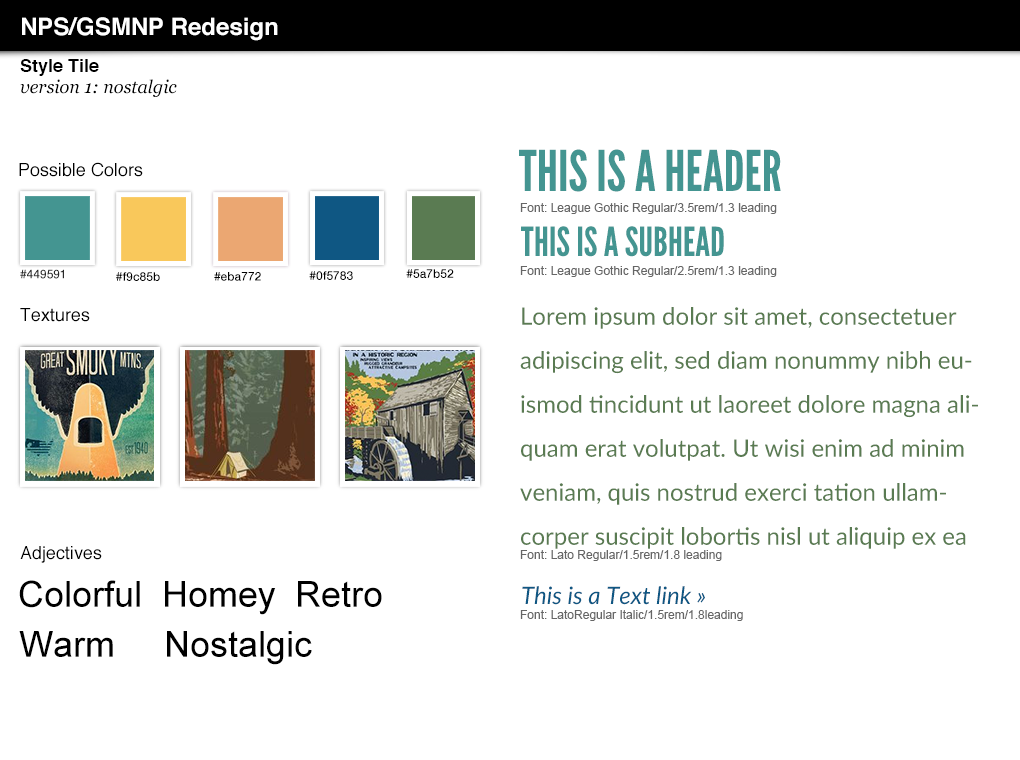
<style>
.page{position:relative;width:1020px;height:760px;background:#ffffff}
.page>*{position:absolute;margin:0}
.t1{font:24px "Helvetica-Bold";color:#ffffff}
.t2{font:18px "Helvetica-Bold";color:#000000}
.t3{font:18px "Georgia-Italic";color:#000000}
.t4{font:56px "LeagueGothic-Regular";color:#449591}
.t5{font:18px "Helvetica";color:#000000}
.t6{font:12px "ArialMT";color:#666666}
.t7{font:40px "LeagueGothic-Regular";color:#449591}
.t8{font:12px "HelveticaNeue-Medium";color:#282828}
.t9{font:12px "HelveticaNeue-Medium";color:#000000}
.t10{font:24px/44px "Lato-Regular";color:#5a7b52}
.t11{font:36px "ArialMT";color:#000000}
.t12{font:24px "Lato-Italic";color:#0f5783}
</style>
<div class="page">
<p class="t1" style="left:22px;top:17px;width:256px;height:24px">NPS/GSMNP Redesign</p>
<p class="t2" style="left:20px;top:59px;width:79px;height:17px">Style Tile</p>
<p class="t3" style="left:20px;top:79px;width:157px;height:18px">version 1: nostalgic</p>
<p class="t4" style="left:519px;top:149px;width:262px;height:43px">THIS IS A HEADER</p>
<p class="t5" style="left:19px;top:162px;width:124px;height:15px">Possible Colors</p>
<p class="t6" style="left:520px;top:203px;width:257px;height:11px">Font: League Gothic Regular/3.5rem/1.3 leading</p>
<p class="t7" style="left:521px;top:226px;width:203px;height:31px">THIS IS A SUBHEAD</p>
<p class="t8" style="left:20px;top:269px;width:44px;height:10px">#449591</p>
<p class="t9" style="left:406px;top:269px;width:48px;height:9px">#5a7b52</p>
<p class="t6" style="left:520px;top:266px;width:257px;height:11px">Font: League Gothic Regular/2.5rem/1.3 leading</p>
<p class="t9" style="left:116px;top:272px;width:44px;height:9px">#f9c85b</p>
<p class="t9" style="left:214px;top:272px;width:47px;height:9px">#eba772</p>
<p class="t9" style="left:309px;top:271px;width:44px;height:9px">#0f5783</p>
<p class="t5" style="left:20px;top:308px;width:70px;height:14px">Textures</p>
<p class="t10" style="left:520px;top:307px;width:458px;height:242px">Lorem ipsum dolor sit amet, consectetuer adipiscing elit, sed diam nonummy nibh euismod tincidunt ut laoreet dolore magna aliquam erat volutpat. Ut wisi enim ad minim veniam, quis nostrud exerci tation ullamcorper suscipit lobortis nisl ut aliquip ex ea commodo consequat. Duis autem vel feugait.</p>
<p class="t5" style="left:20px;top:546px;width:82px;height:17px">Adjectives</p>
<p class="t6" style="left:520px;top:550px;width:202px;height:11px">Font: Lato Regular/1.5rem/1.8 leading</p>
<p class="t11" style="left:19px;top:580px;width:121px;height:28px">Colorful</p>
<p class="t11" style="left:165px;top:581px;width:111px;height:34px">Homey</p>
<p class="t11" style="left:298px;top:581px;width:84px;height:26px">Retro</p>
<p class="t12" style="left:522px;top:586px;width:183px;height:19px">This is a Text link »</p>
<p class="t6" style="left:520px;top:610px;width:223px;height:11px">Font: LatoRegular Italic/1.5rem/1.8leading</p>
<p class="t11" style="left:19px;top:631px;width:94px;height:26px">Warm</p>
<p class="t11" style="left:167px;top:631px;width:145px;height:34px">Nostalgic</p>
</div>
